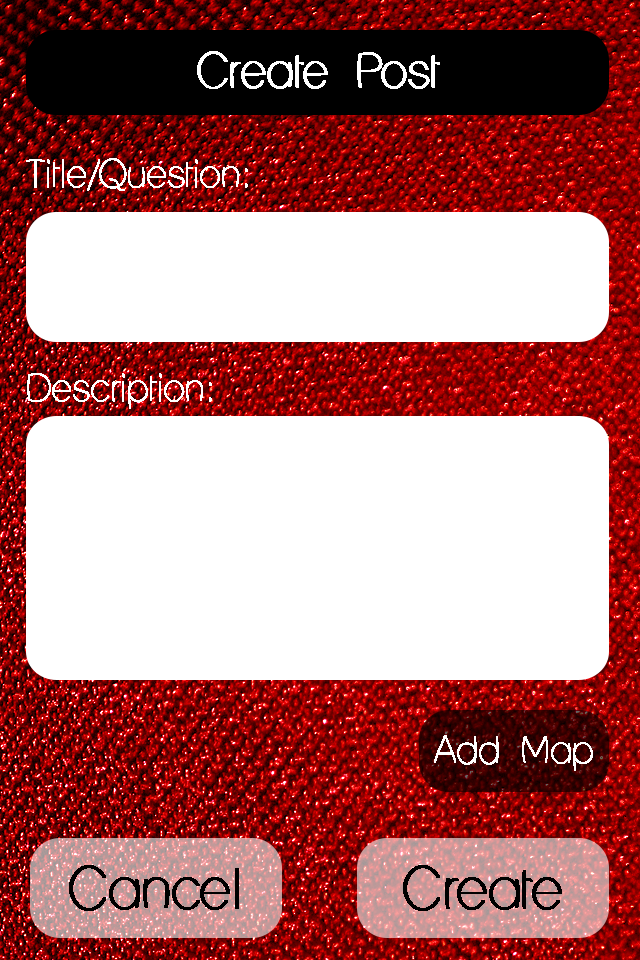
<style>
.page{position:relative;width:640px;height:960px;background:#ffffff}
.page>*{position:absolute;margin:0}
.t1{font:45.5px "LaneHumouresque";color:#ffffff;font-weight:bold}
.t2{font:35.9px "LaneHumouresque";color:#ffffff;font-weight:bold}
.t3{font:53.7px "LaneHumouresque";color:#000000;font-weight:bold}
</style>
<div class="page">
<p class="t1" style="left:197px;top:51px;width:243px;height:38px">Create Post</p>
<p class="t2" style="left:26px;top:158px;width:222px;height:33px">Title/Question:</p>
<p class="t2" style="left:27px;top:373px;width:185px;height:36px">Description:</p>
<p class="t2" style="left:434px;top:735px;width:159px;height:36px">Add Map</p>
<p class="t3" style="left:69px;top:865px;width:170px;height:46px">Cancel</p>
<p class="t3" style="left:403px;top:865px;width:159px;height:46px">Create</p>
</div>
